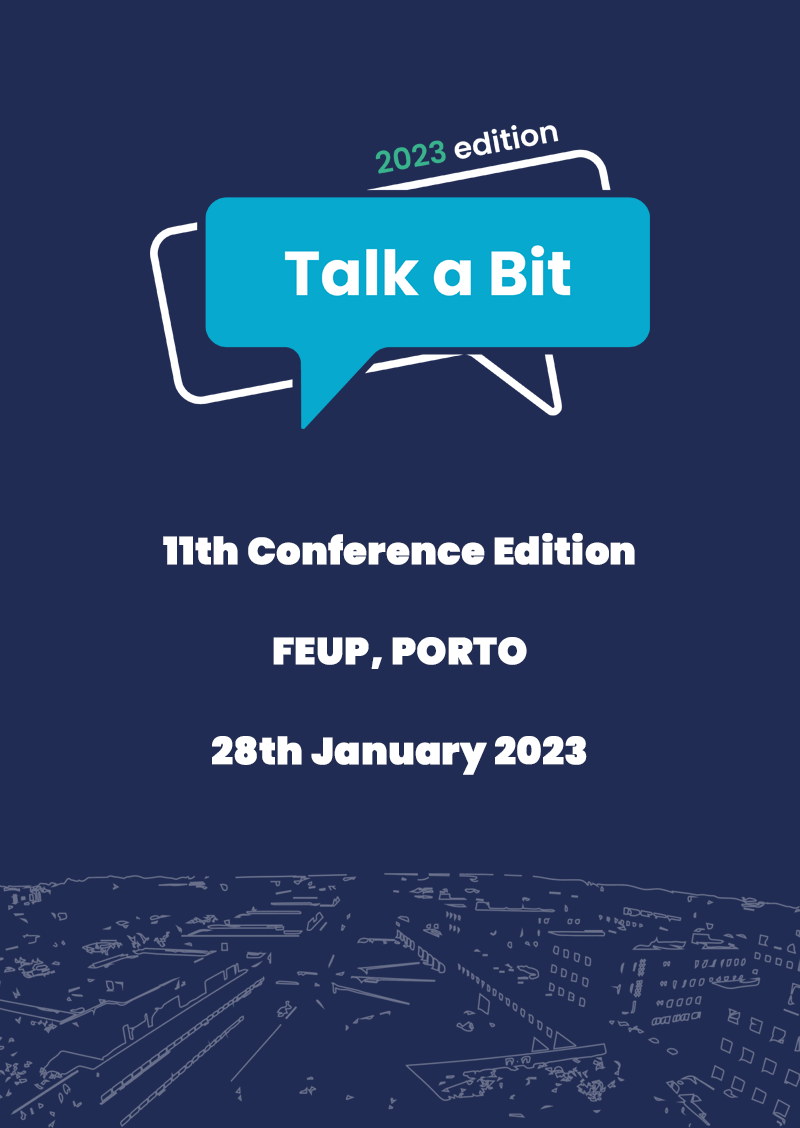
<style>
.page{position:relative;width:800px;height:1128px;background:#212c55}
.page>*{position:absolute;margin:0}
.t1{font:37.5px/100px "Poppins-Black";color:#ffffff;font-weight:bold}
</style>
<div class="page">
<p class="t1" style="left:163px;top:533px;width:472px;height:242px;text-align:center">11th Conference Edition<br>FEUP, PORTO<br>28th January 2023</p>
</div>
